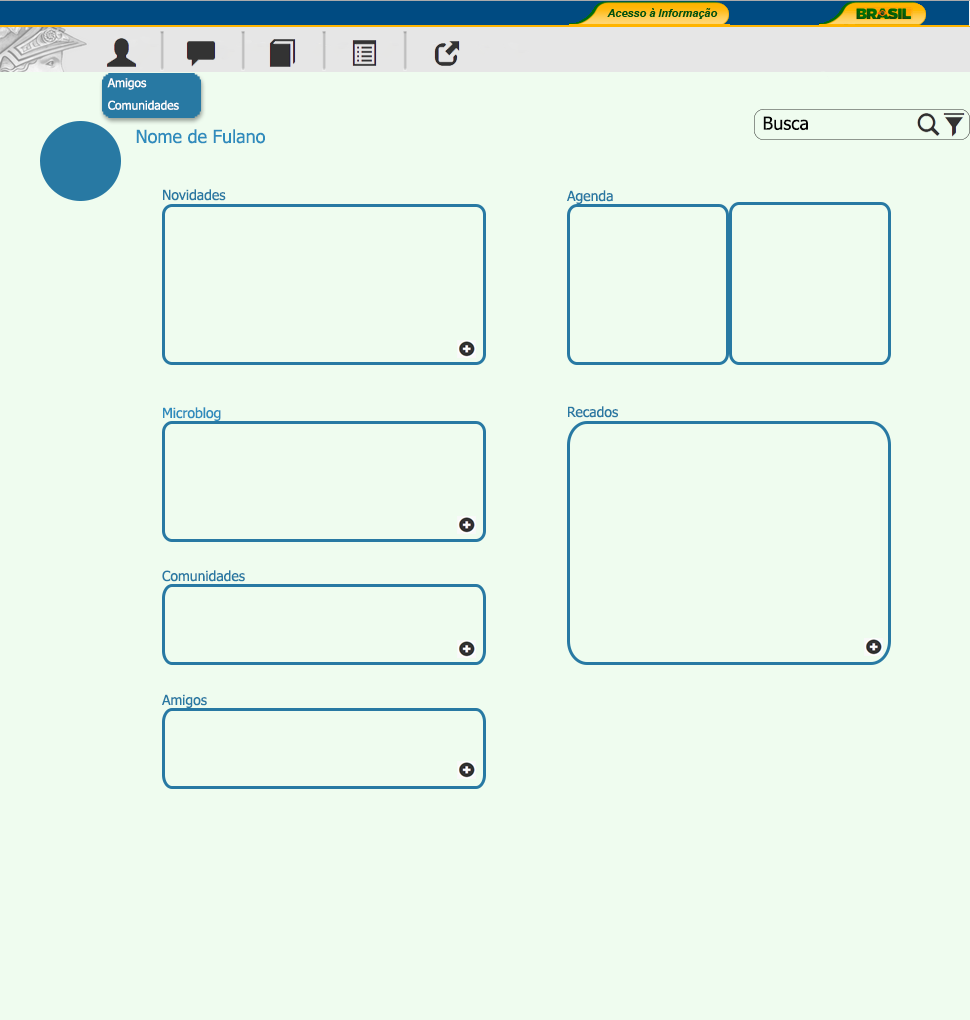
<style>
.page{position:relative;width:970px;height:1020px;background:#effcef}
.page>*{position:absolute;margin:0}
.t1{font:12px "Tahoma";color:#ffffff}
.t2{font:18px "Tahoma";color:#040404}
.t3{font:18px "Tahoma";color:#2e8cbd}
.t4{font:14px "Tahoma";color:#2879a3}
.t5{font:14px "Tahoma";color:#2e8cbd}
</style>
<div class="page">
<p class="t1" style="left:107px;top:78px;width:40px;height:12px">Amigos</p>
<p class="t1" style="left:108px;top:100px;width:71px;height:10px">Comunidades</p>
<p class="t2" style="left:763px;top:116px;width:45px;height:15px">Busca</p>
<p class="t3" style="left:136px;top:129px;width:129px;height:15px">Nome de Fulano</p>
<p class="t4" style="left:163px;top:189px;width:63px;height:12px">Novidades</p>
<p class="t4" style="left:567px;top:190px;width:46px;height:14px">Agenda</p>
<p class="t5" style="left:163px;top:407px;width:58px;height:14px">Microblog</p>
<p class="t4" style="left:568px;top:406px;width:50px;height:12px">Recados</p>
<p class="t4" style="left:162px;top:570px;width:83px;height:12px">Comunidades</p>
<p class="t4" style="left:162px;top:694px;width:45px;height:14px">Amigos</p>
</div>
